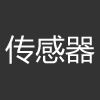
<style>
.page{position:relative;width:100px;height:100px;background:#333333}
.page>*{position:absolute;margin:0}
.t1{font:30px "MicrosoftYaHei";color:#ffffff}
</style>
<div class="page">
<p class="t1" style="left:5px;top:35px;width:90px;height:29px">传感器</p>
</div>
